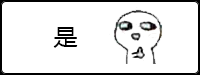
<style>
.page{position:relative;width:200px;height:75px;background:#ffffff}
.page>*{position:absolute;margin:0}
.t1{font:24px "MicrosoftYaHei";color:#000000}
</style>
<div class="page">
<p class="t1" style="left:53px;top:27px;width:25px;height:21px">是</p>
</div>
